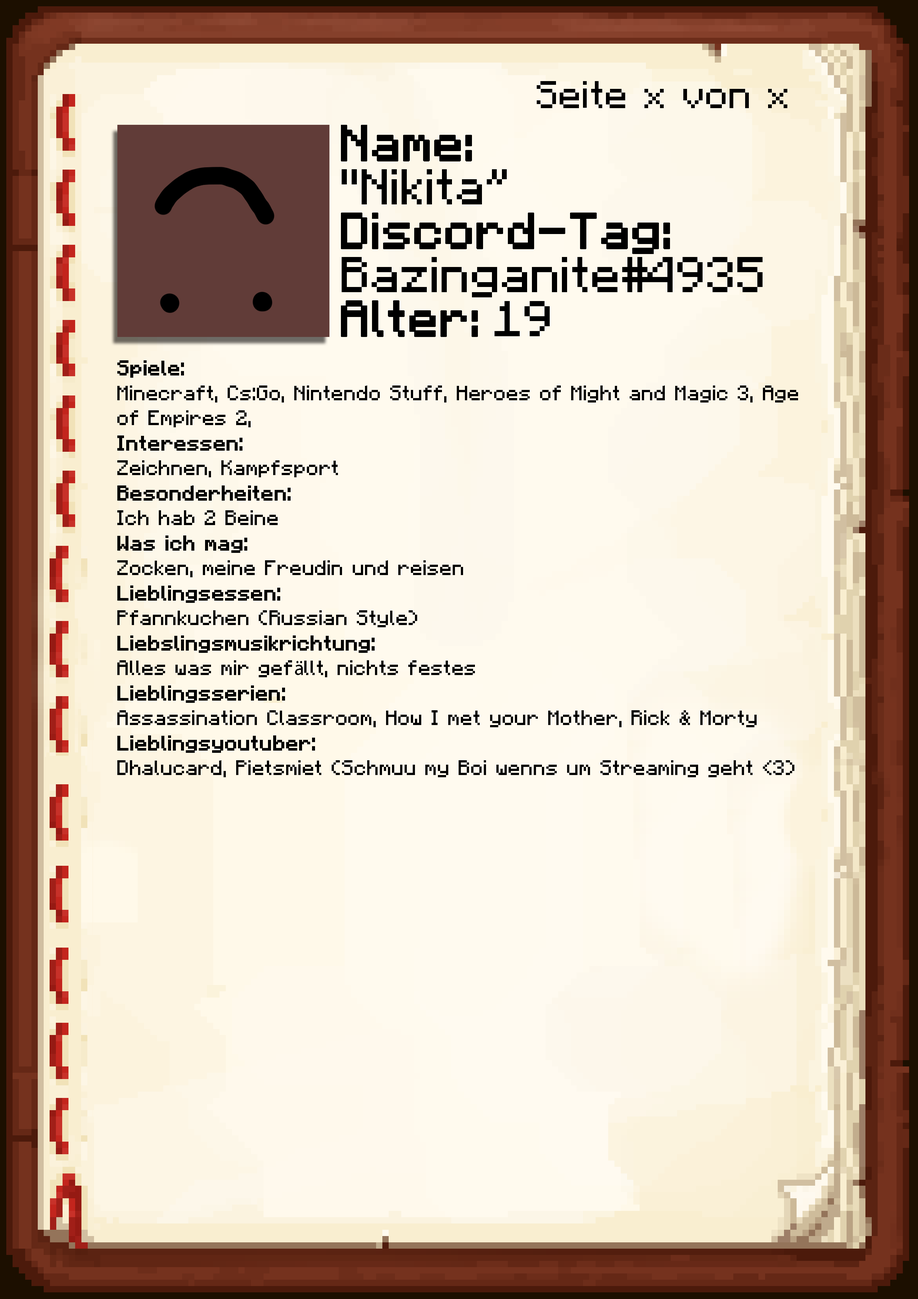
<style>
.page{position:relative;width:918px;height:1299px}
.page>*{position:absolute;margin:0}
.t1{font:38.6px "Minecraft-Regular";color:#000000}
.t2{font:40.1px/43.9px "Minecraft";color:#000000}
.t3{font:40.1px/43.9px "Minecraft";color:#000000;font-weight:bold}
.t4{font:20.8px "Minecraft-Regular";color:#000000}
.t5{font:20.8px "Minecraft-Regular";color:#000000;font-weight:bold}
.t6{font:20.8px "MyriadPro-Regular";color:#000000}
</style>
<div class="page">
<p class="t1" style="left:537px;top:81px;width:250px;height:27px">Seite x von x</p>
<p class="t2" style="left:341px;top:125px;width:422px;height:212px"><span class="t3">Name:<br></span>"Nikita”<br><span class="t3">Discord-Tag:<br></span>Bazinganite#4935<br><span class="t3">Alter: </span>19</p>
<p class="t4" style="left:117px;top:360px;width:681px;height:417px"><span class="t5">Spiele: <br></span>Minecraft, Cs:Go, Nintendo Stuff, Heroes of Might and Magic 3, Age of Empires 2,<br><span class="t5">Interessen:<br></span>Zeichnen, Kampfsport<br><span class="t5">Besonderheiten:<br></span>Ich hab 2 Beine<br><span class="t5">Was ich mag:<br></span>Zocken, meine Freudin und reisen<br><span class="t5">Lieblingsessen:<br></span>Pfannkuchen (Russian Style)<br><span class="t5">Liebslingsmusikrichtung:<br></span>Alles was mir gef<span class="t6">ä</span>llt, nichts festes<br><span class="t5">Lieblingsserien:<br></span>Assassination Classroom, How I met your Mother, Rick &amp; Morty<br><span class="t5">Lieblingsyoutuber:<br></span>Dhalucard, Pietsmiet (Schmuu my Boi wenns um Streaming geht &lt;3)</p>
</div>
